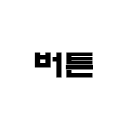
<style>
.page{position:relative;width:128px;height:128px;background:#ffffff}
.page>*{position:absolute;margin:0}
.t1{font:30px "HYtbrB";color:#000000;text-transform:uppercase;font-weight:bold}
</style>
<div class="page">
<p class="t1" style="left:34px;top:52px;width:59px;height:26px">버튼</p>
</div>
